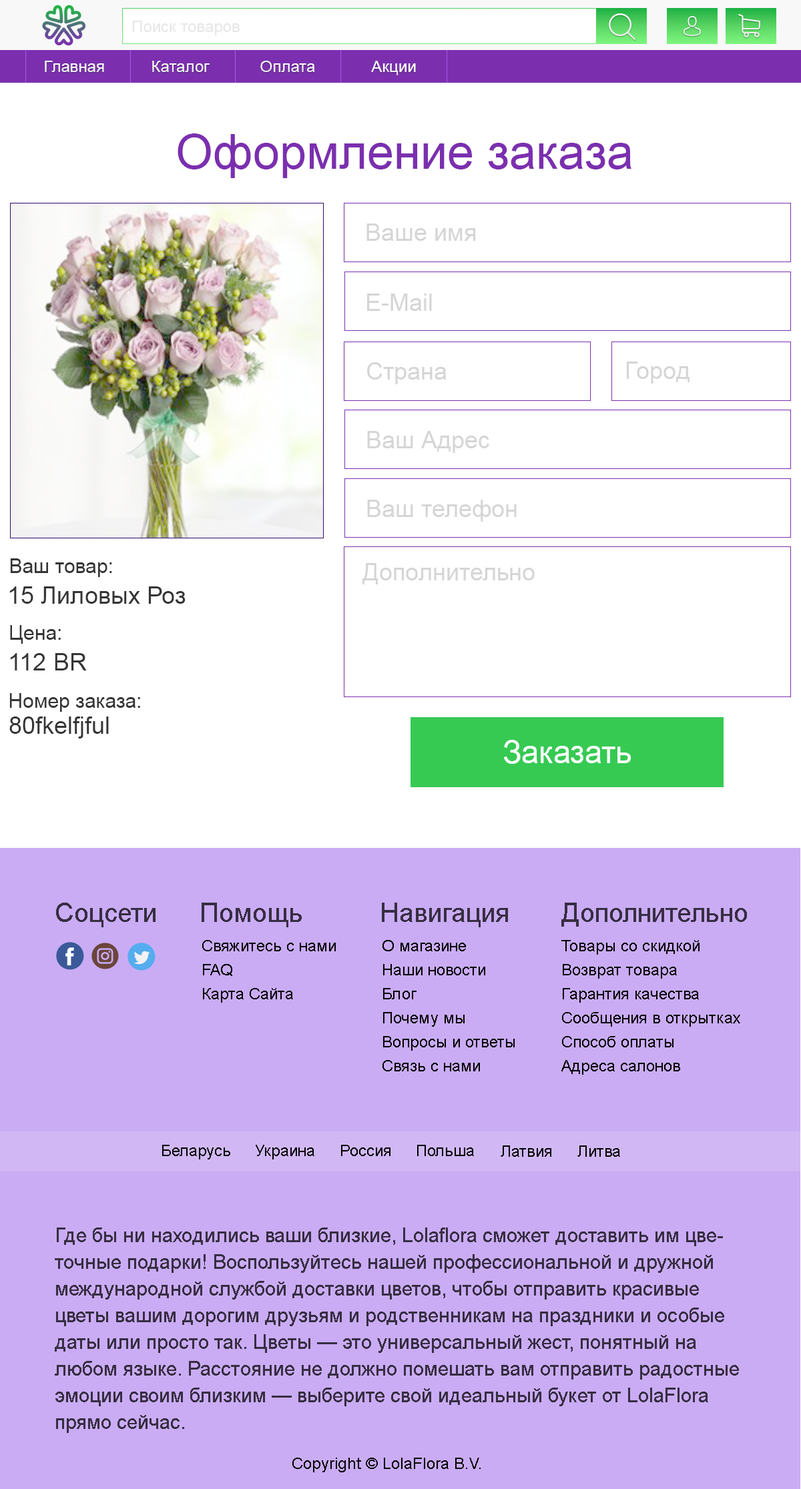
<style>
.page{position:relative;width:801px;height:1489px;background:#ffffff}
.page>*{position:absolute;margin:0}
.t1{font:16px "ArialMT";color:#e7e7e7}
.t2{font:48px "ArialMT";color:#7b2faf}
.t3{font:24px "ArialMT";color:#d5d5d5}
.t4{font:20px "ArialMT";color:#353535}
.t5{font:24px "ArialMT";color:#353535}
.t6{font:31.2px "ArialMT";color:#ffffff}
.t7{font:26.7px "ArialMT";color:#372e42}
.t8{font:16px/24px "ArialMT";color:#000000}
.t9{font:16px "ArialMT";color:#000000}
.t10{font:20px/26.7px "ArialMT";color:#372e42}
</style>
<div class="page">
<p class="t1" style="left:132px;top:21px;width:108px;height:14px">Поиск товаров</p>
<p class="t1" style="left:45px;top:61px;width:59px;height:11px">Главная</p>
<p class="t1" style="left:152px;top:61px;width:58px;height:11px">Каталог</p>
<p class="t1" style="left:260px;top:61px;width:55px;height:11px">Оплата</p>
<p class="t1" style="left:371px;top:61px;width:45px;height:14px">Акции</p>
<p class="t2" style="left:177px;top:133px;width:454px;height:45px">Оформление заказа</p>
<p class="t3" style="left:366px;top:224px;width:110px;height:17px">Ваше имя</p>
<p class="t3" style="left:367px;top:294px;width:65px;height:17px">E-Mail</p>
<p class="t3" style="left:367px;top:362px;width:79px;height:22px">Страна</p>
<p class="t3" style="left:626px;top:362px;width:63px;height:22px">Город</p>
<p class="t3" style="left:367px;top:431px;width:122px;height:22px">Ваш Адрес</p>
<p class="t3" style="left:367px;top:500px;width:149px;height:22px">Ваш телефон</p>
<p class="t4" style="left:10px;top:558px;width:102px;height:19px">Ваш товар:</p>
<p class="t3" style="left:362px;top:563px;width:172px;height:21px">Дополнительно</p>
<p class="t5" style="left:9px;top:587px;width:176px;height:17px">15 Лиловых Роз</p>
<p class="t4" style="left:10px;top:625px;width:51px;height:19px">Цена:</p>
<p class="t5" style="left:10px;top:653px;width:77px;height:18px">112 BR</p>
<p class="t4" style="left:9px;top:693px;width:131px;height:19px">Номер заказа:</p>
<p class="t5" style="left:9px;top:717px;width:100px;height:22px">80fkelfjful</p>
<p class="t6" style="left:503px;top:740px;width:128px;height:24px">Заказать</p>
<p class="t7" style="left:56px;top:903px;width:99px;height:24px">Соцсети</p>
<p class="t7" style="left:202px;top:903px;width:100px;height:24px">Помощь</p>
<p class="t7" style="left:382px;top:903px;width:126px;height:24px">Навигация</p>
<p class="t7" style="left:561px;top:903px;width:186px;height:24px">Дополнительно</p>
<p class="t8" style="left:202px;top:940px;width:134px;height:63px">Свяжитесь с нами<br>FAQ<br>Карта Сайта</p>
<p class="t8" style="left:382px;top:940px;width:132px;height:132px">О магазине<br>Наши новости<br>Блог<br>Почему мы <br>Вопросы и ответы<br>Связь с нами</p>
<p class="t8" style="left:561px;top:940px;width:179px;height:135px">Товары со скидкой<br>Возврат товара<br>Гарантия качества<br>Сообщения в открытках<br>Способ оплаты<br>Адреса салонов</p>
<p class="t9" style="left:162px;top:1145px;width:68px;height:15px">Беларусь</p>
<p class="t9" style="left:256px;top:1145px;width:58px;height:15px">Украина</p>
<p class="t9" style="left:341px;top:1145px;width:49px;height:11px">Россия</p>
<p class="t9" style="left:417px;top:1145px;width:57px;height:11px">Польша</p>
<p class="t9" style="left:500px;top:1146px;width:51px;height:11px">Латвия</p>
<p class="t9" style="left:577px;top:1146px;width:43px;height:11px">Литва</p>
<p class="t10" style="left:55px;top:1228px;width:684px;height:205px">Где бы ни находились ваши близкие, Lolaflora сможет доставить им цветочные подарки! Воспользуйтесь нашей профессиональной и дружной международной службой доставки цветов, чтобы отправить красивые цветы вашим дорогим друзьям и родственникам на праздники и особые даты или просто так. Цветы — это универсальный жест, понятный на любом языке. Расстояние не должно помешать вам отправить радостные эмоции своим близким — выберите свой идеальный букет от LolaFlora прямо сейчас.</p>
<p class="t9" style="left:292px;top:1458px;width:188px;height:15px">Copyright © LolaFlora B.V.</p>
</div>
